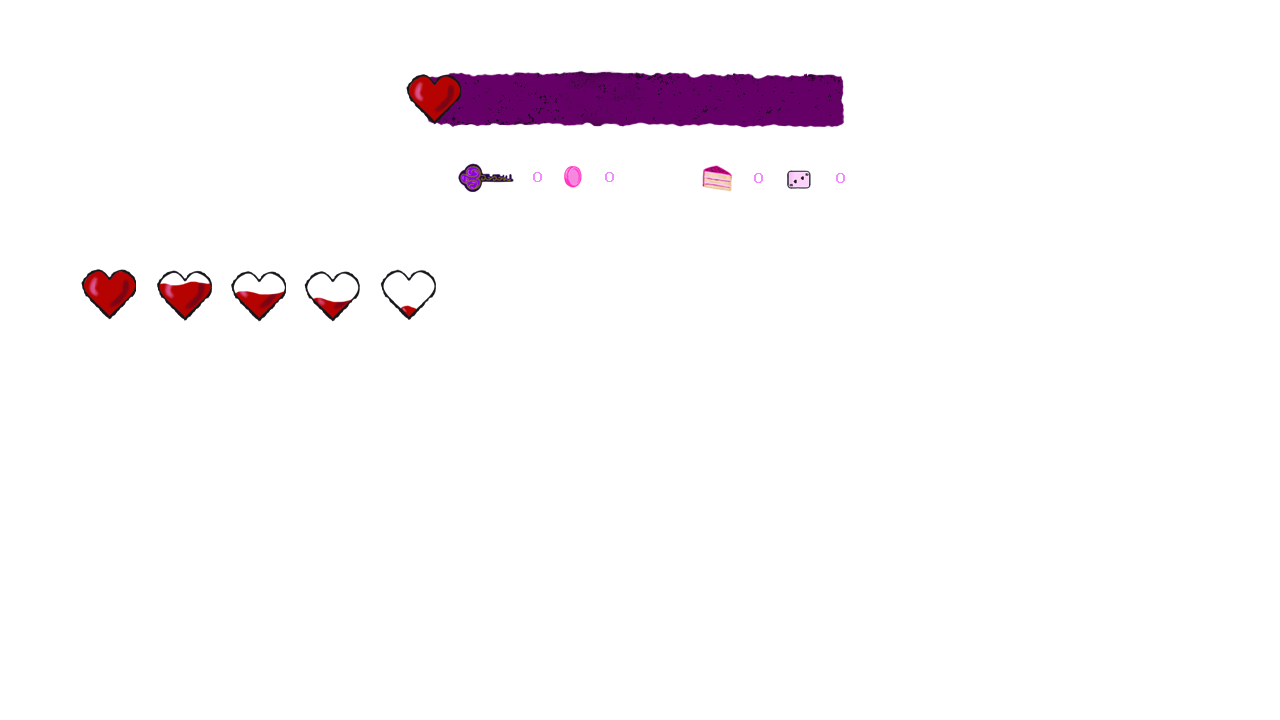
<style>
.page{position:relative;width:1280px;height:720px;background:#ffffff}
.page>*{position:absolute;margin:0}
.t1{font:18px "Georgia";letter-spacing:0.05em;color:#f08cfd}
</style>
<div class="page">
<p class="t1" style="left:533px;top:172px;width:9px;height:10px">0</p>
<p class="t1" style="left:605px;top:172px;width:9px;height:10px">0</p>
<p class="t1" style="left:754px;top:173px;width:9px;height:10px">0</p>
<p class="t1" style="left:836px;top:173px;width:9px;height:10px">0</p>
</div>
